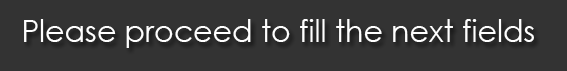
<style>
.page{position:relative;width:567px;height:71px;background:#333333}
.page>*{position:absolute;margin:0}
.t1{font:30px "CenturyGothic";color:#ffffff}
</style>
<div class="page">
<p class="t1" style="left:24px;top:19px;width:510px;height:29px">Please proceed to fill the next fields</p>
</div>
